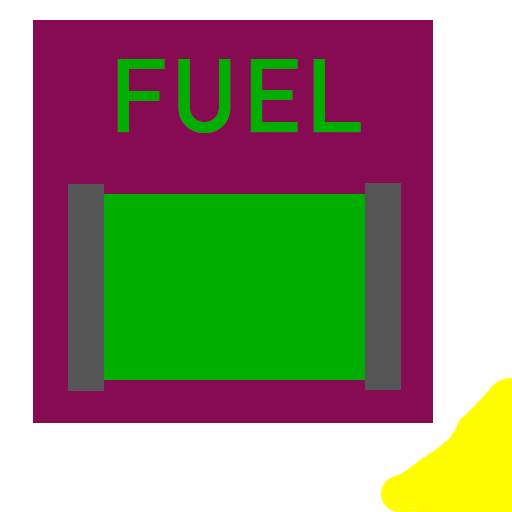
<style>
.page{position:relative;width:512px;height:512px;background:#870b53}
.page>*{position:absolute;margin:0}
.t1{font:103px "DINAlternate-Bold";letter-spacing:0.06em;color:#00ae00}
</style>
<div class="page">
<p class="t1" style="left:117px;top:59px;width:244px;height:74px">FUEL</p>
</div>
